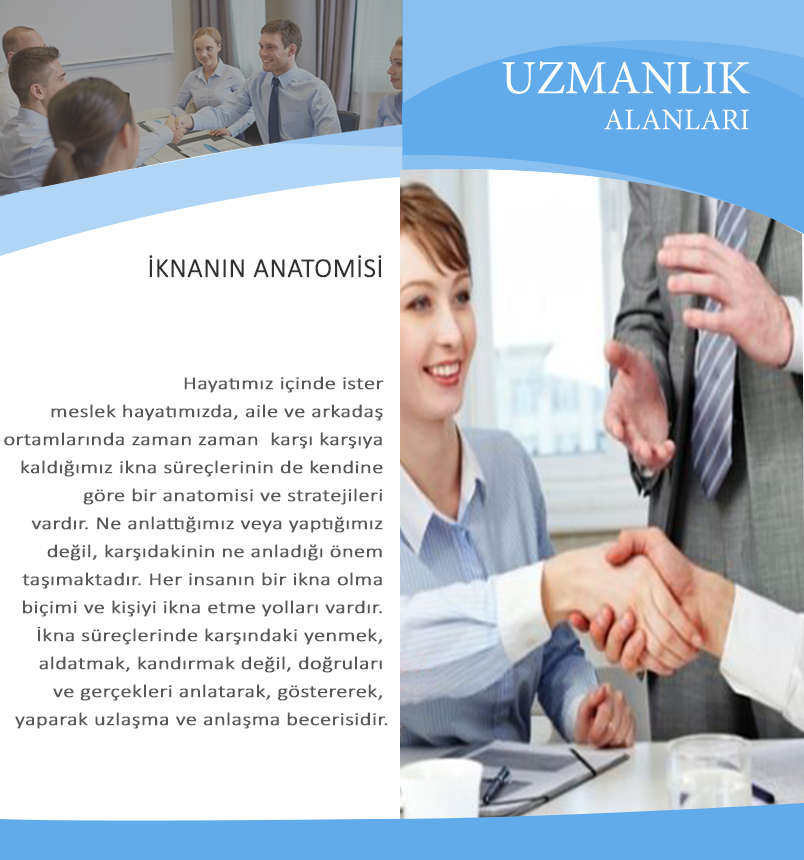
<style>
.page{position:relative;width:804px;height:860px;background:#ffffff}
.page>*{position:absolute;margin:0}
.t1{font:47.6px "MinionPro-Regular";color:#ffffff}
.t2{font:30px "MinionPro-Regular";color:#ffffff}
.t3{font:27px "Calibri-Light";color:#313131;font-weight:bold}
.t4{font:18.1px/28px "Calibri-Light";color:#575757;font-weight:bold;scale:1.22 1}
</style>
<div class="page">
<p class="t1" style="left:502px;top:61px;width:248px;height:69px;text-align:right">UZMANLIK<br><span class="t2"> ALANLARI</span></p>
<p class="t3" style="left:149px;top:255px;width:233px;height:23px">İKNANIN ANATOMİSİ</p>
<p class="t4" style="left:4px;top:376px;width:384px;height:353px;text-align:right">Hayatımız içinde ister <br>meslek hayatımızda, aile ve arkadaş <br>ortamlarında zaman zaman  karşı karşıya <br>kaldığımız ikna süreçlerinin de kendine <br>göre bir anatomisi ve stratejileri <br>vardır. Ne anlattığımız veya yaptığımız <br>değil, karşıdakinin ne anladığı önem <br>taşımaktadır. Her insanın bir ikna olma <br>biçimi ve kişiyi ikna etme yolları vardır. <br>İkna süreçlerinde karşındaki yenmek, <br>aldatmak, kandırmak değil, doğruları <br>ve gerçekleri anlatarak, göstererek, <br>yaparak uzlaşma ve anlaşma becerisidir.</p>
</div>
